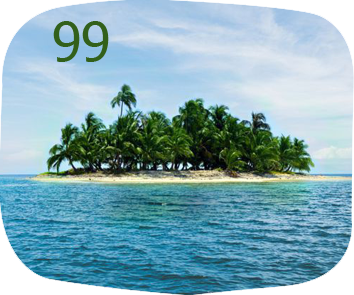
<style>
.page{position:relative;width:354px;height:295px}
.page>*{position:absolute;margin:0}
.t1{font:54px "Tahoma";color:#32601a}
</style>
<div class="page">
<p class="t1" style="left:53px;top:21px;width:56px;height:41px">99</p>
</div>
